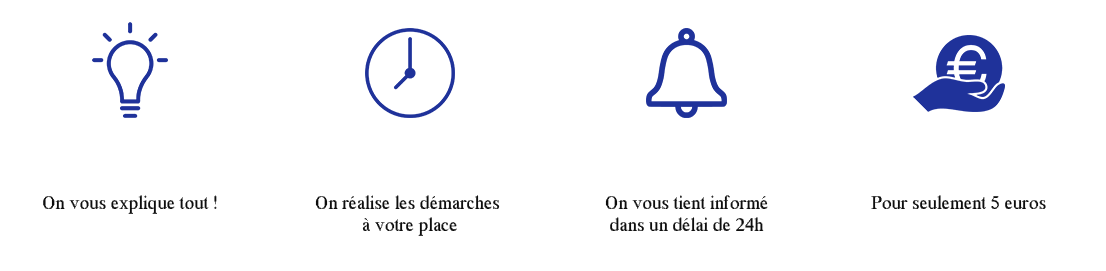
<style>
.page{position:relative;width:1106px;height:271px;background:#ffffff}
.page>*{position:absolute;margin:0}
.t1{font:18.7px "MS Serif";color:#000000}
</style>
<div class="page">
<p class="t1" style="left:43px;top:195px;width:174px;height:19px">On vous explique tout !</p>
<p class="t1" style="left:315px;top:195px;width:185px;height:41px;text-align:center">On réalise les démarches <br>à votre place</p>
<p class="t1" style="left:605px;top:195px;width:163px;height:36px;text-align:center">On vous tient informé<br>dans un délai de 24h</p>
<p class="t1" style="left:871px;top:195px;width:175px;height:14px">Pour seulement 5 euros</p>
</div>
